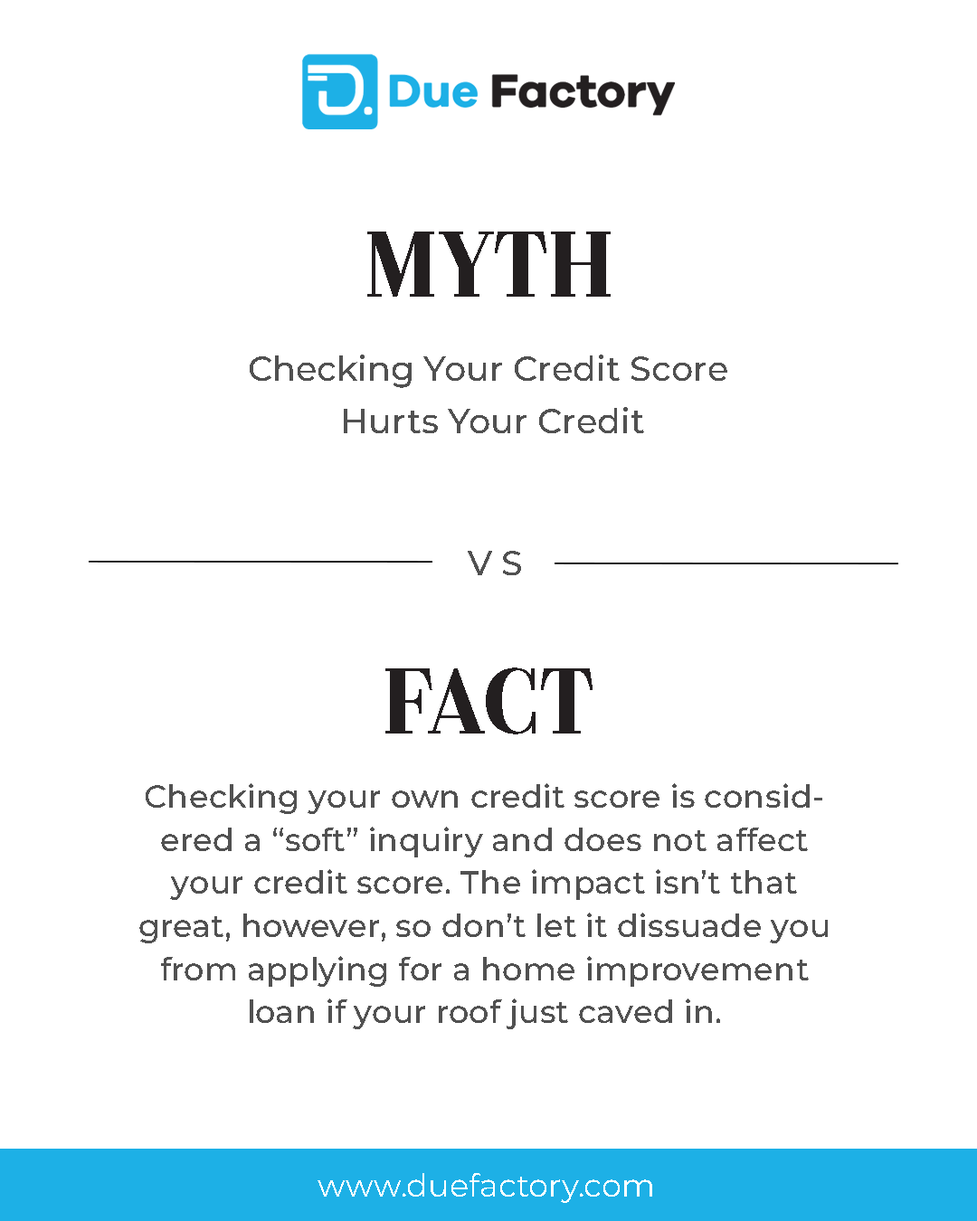
<style>
.page{position:relative;width:977px;height:1221px;background:#ffffff}
.page>*{position:absolute;margin:0}
.t1{font:81px "Couturier-SemiBold";color:#231f20}
.t2{font:33.9px/52.9px "Montserrat-Medium";color:#515151}
.t3{font:33.9px "Montserrat-Medium";color:#515151}
.t4{font:32px/43.1px "Montserrat-Medium";color:#515151}
.t5{font:32px "Montserrat-Regular";color:#ffffff}
</style>
<div class="page">
<p class="t1" style="left:367px;top:232px;width:243px;height:65px">MYTH</p>
<p class="t2" style="left:250px;top:355px;width:477px;height:78px;text-align:center">Checking Your Credit Score <br>Hurts Your Credit</p>
<p class="t3" style="left:468px;top:551px;width:53px;height:24px">V S</p>
<p class="t1" style="left:385px;top:667px;width:207px;height:67px">FACT</p>
<p class="t4" style="left:139px;top:783px;width:688px;height:246px;text-align:center">Checking your own credit score is considered a “soft” inquiry and does not affect your credit score. The impact isn’t that great, however, so don’t let it dissuade you from applying for a home improvement loan if your roof just caved in.</p>
<p class="t5" style="left:317px;top:1173px;width:335px;height:30px">www.duefactory.com</p>
</div>
